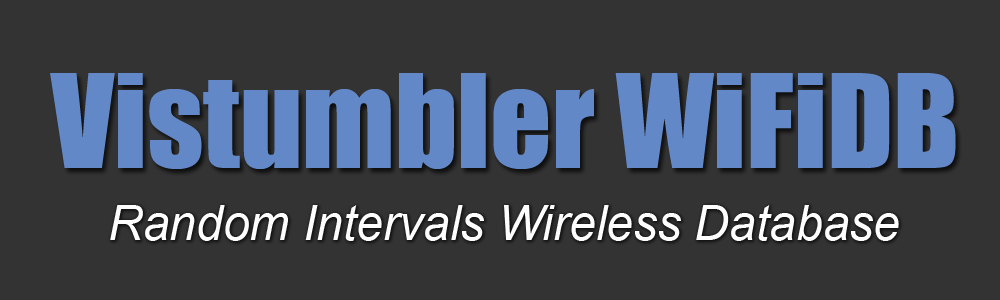
<style>
.page{position:relative;width:1000px;height:300px;background:#333333}
.page>*{position:absolute;margin:0}
.t1{font:120px "Impact";color:#6388c7}
.t2{font:48px "Arial-ItalicMT";color:#fefeff}
</style>
<div class="page">
<p class="t1" style="left:50px;top:73px;width:906px;height:96px">Vistumbler WiFiDB</p>
<p class="t2" style="left:110px;top:205px;width:789px;height:36px">Random Intervals Wireless Database</p>
</div>
